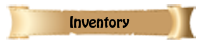
<style>
.page{position:relative;width:200px;height:46px;background:#ffffff}
.page>*{position:absolute;margin:0}
.t1{font:14px "HoboStd";color:#000000}
</style>
<div class="page">
<p class="t1" style="left:70px;top:16px;width:60px;height:12px">Inventory</p>
</div>
